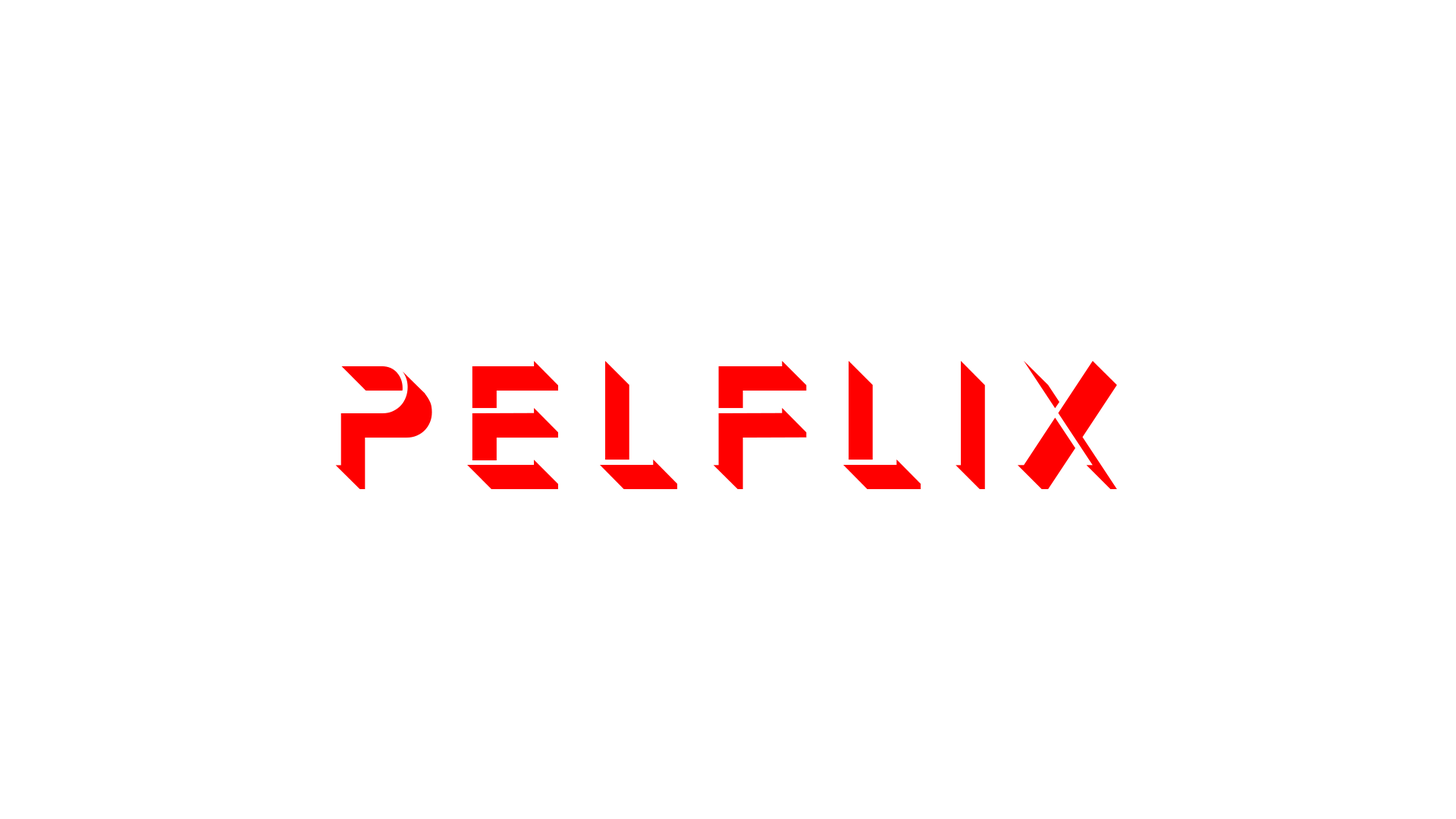
<style>
.page{position:relative;width:1456px;height:819px;background:#ffffff}
.page>*{position:absolute;margin:0}
.t1{font:212.2px "Demode-Regular";color:#ff0000}
</style>
<div class="page">
<p class="t1" style="left:335px;top:361px;width:782px;height:128px">pelflix</p>
</div>
